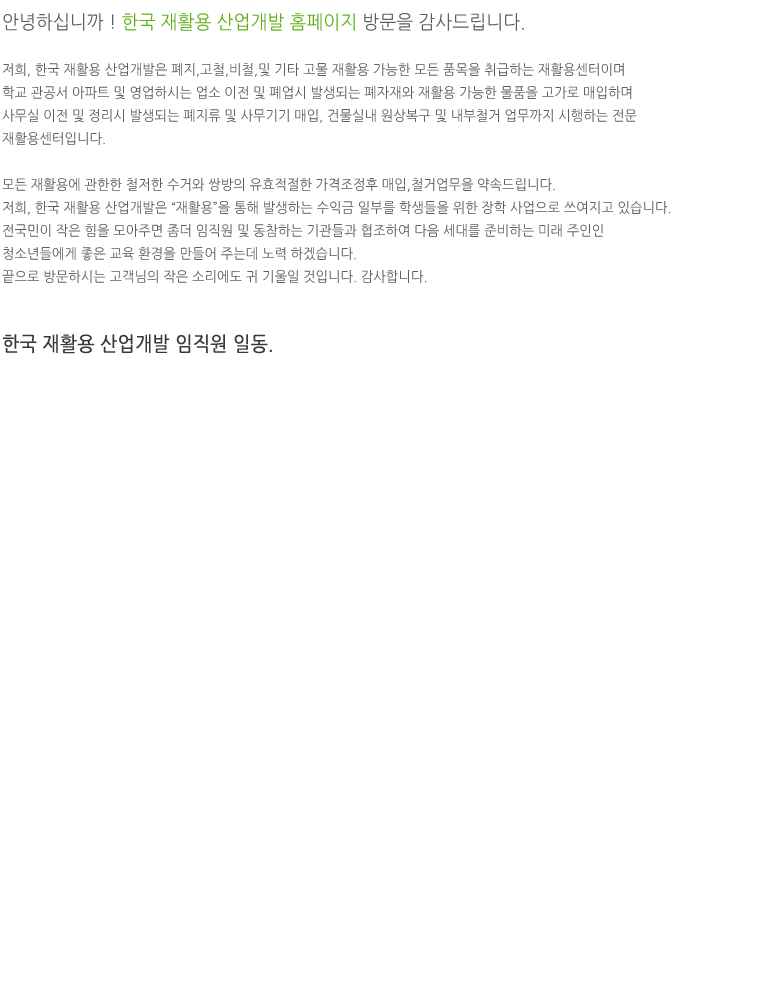
<style>
.page{position:relative;width:782px;height:1000px;background:#ffffff}
.page>*{position:absolute;margin:0}
.t1{font:14px/23px "NanumGothic";color:#5e5e5e;scale:0.95 1}
.t2{font:19px/23px "NanumGothic";color:#5e5e5e;scale:0.95 1}
.t3{font:19px/23px "NanumGothic";color:#5cb011;scale:0.95 1}
.t4{font:20px "NanumGothic";color:#232323;font-weight:bold;scale:0.9 1}
</style>
<div class="page">
<p class="t1" style="left:2px;top:13px;width:669px;height:270px"><span class="t2">안녕하십니까 ! </span><span class="t3">한국 재활용 산업개발 홈페이지 </span><span class="t2">방문을 감사드립니다.<br><br></span>저희, 한국 재활용 산업개발은 폐지,고철,비철,및 기타 고물 재활용 가능한 모든 품목을 취급하는 재활용센터이며 <br>학교 관공서 아파트 및 영업하시는 업소 이전 및 폐업시 발생되는 폐자재와 재활용 가능한 물품을 고가로 매입하며 <br>사무실 이전 및 정리시 발생되는 폐지류 및 사무기기 매입, 건물실내 원상복구 및 내부철거 업무까지 시행하는 전문 <br>재활용센터입니다. <br><br>모든 재활용에 관한한 철저한 수거와 쌍방의 유효적절한 가격조정후 매입,철거업무을 약속드립니다.<br>저희, 한국 재활용 산업개발은 “재활용”을 통해 발생하는 수익금 일부를 학생들을 위한 장학 사업으로 쓰여지고 있습니다.<br>전국민이 작은 힘을 모아주면 좀더 임직원 및 동참하는 기관들과 협조하여 다음 세대를 준비하는 미래 주인인 <br>청소년들에게 좋은 교육 환경을 만들어 주는데 노력 하겠습니다.<br>끝으로 방문하시는 고객님의 작은 소리에도 귀 기울일 것입니다. 감사합니다.</p>
<p class="t4" style="left:2px;top:334px;width:270px;height:20px;opacity:0.9">한국 재활용 산업개발 임직원 일동.</p>
</div>
